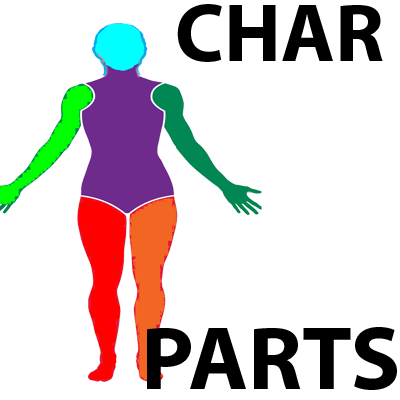
<style>
.page{position:relative;width:400px;height:400px;background:#ffffff}
.page>*{position:absolute;margin:0}
.t1{font:82.4px "MyriadPro-Bold";color:#000000}
.t2{font:91.1px "MyriadPro-Bold";color:#000000}
</style>
<div class="page">
<p class="t1" style="left:177px;top:4px;width:206px;height:58px">CHAR</p>
<p class="t2" style="left:147px;top:327px;width:250px;height:63px">PARTS</p>
</div>
